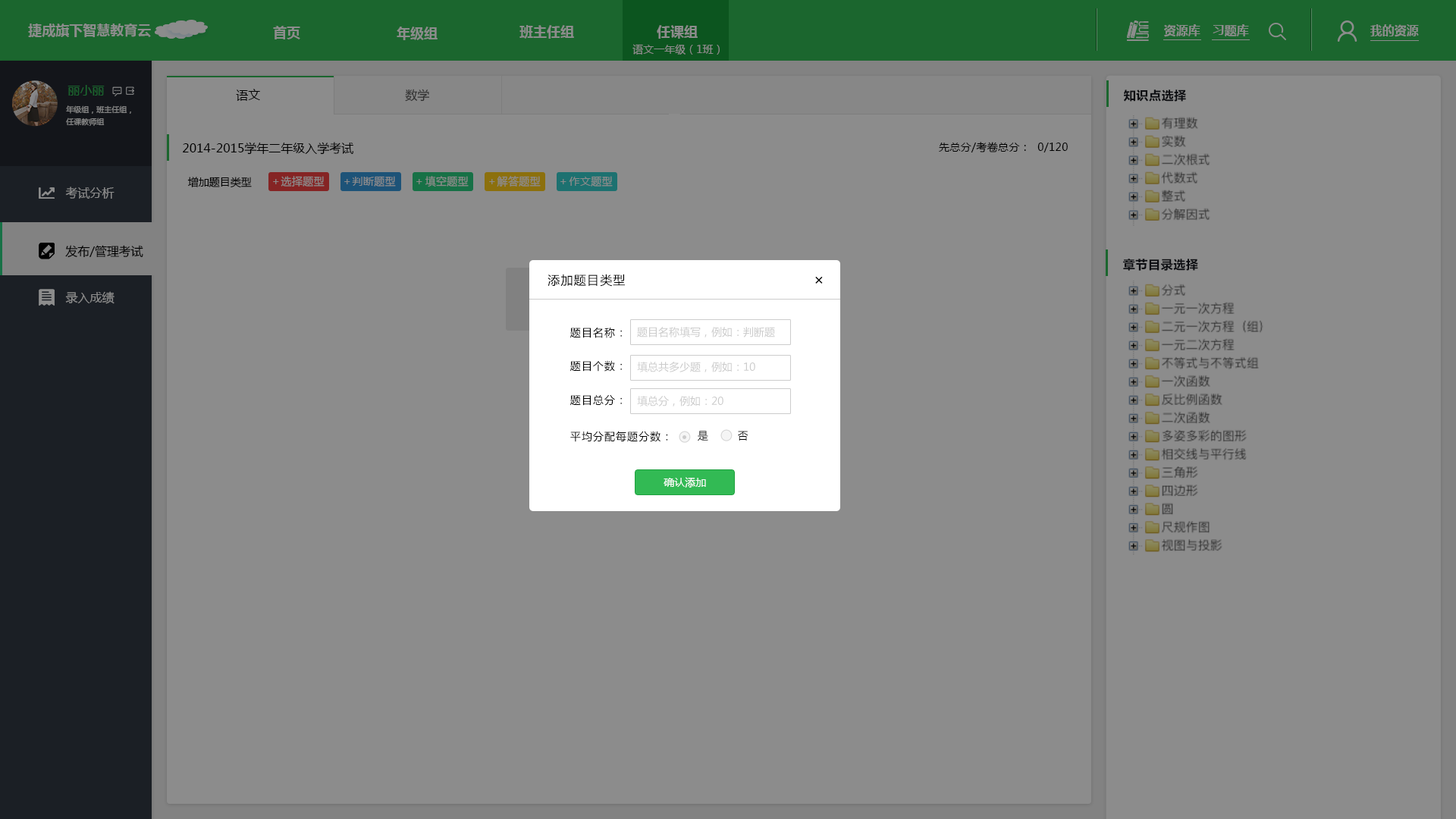
<style>
.page{position:relative;width:1456px;height:819px;background:#8c8c8c}
.page>*{position:absolute;margin:0}
.t1{font:13.6px "MicrosoftYaHei-Bold";color:#8c8c8c}
.t2{font:12.1px "MicrosoftYaHei-Bold";color:#8c8c8c}
.t3{font:10.6px "MicrosoftYaHei";color:#8c8c8c}
.t4{font:12.1px "MicrosoftYaHei";color:#1b662e}
.t5{font:12.1px "MicrosoftYaHei";color:#000000}
.t6{font:12.1px "MicrosoftYaHei";color:#2e2e2e}
.t7{font:12.1px "MicrosoftYaHei-Bold";letter-spacing:0.04em;color:#171a21}
.t8{font:7.6px/12.1px "MicrosoftYaHei";color:#8c8c8c}
.t9{font:10.6px "MicrosoftYaHei";letter-spacing:0.025em;color:#000000}
.t10{font:10.6px "MicrosoftYaHei";color:#000000}
.t11{font:10.6px "MicrosoftYaHei";letter-spacing:0.025em;color:#8c8c8c}
.t12{font:12.1px "MicrosoftYaHei";color:#8c8c8c}
.t13{font:12.1px "MicrosoftYaHei";letter-spacing:0.075em;color:#000000}
.t14{font:15.2px "MicrosoftYaHei";letter-spacing:0.075em;color:#000000}
.t15{font:10.6px "MicrosoftYaHei";letter-spacing:0.075em;color:#000000}
.t16{font:10.6px "MicrosoftYaHei";color:#cccccc}
.t17{font:10.6px "MicrosoftYaHei";color:#fffefe}
</style>
<div class="page">
<p class="t1" style="left:28px;top:24px;width:123px;height:13px">捷成旗下智慧教育云</p>
<p class="t1" style="left:273px;top:26px;width:27px;height:13px">首页</p>
<p class="t1" style="left:397px;top:27px;width:41px;height:13px">年级组</p>
<p class="t1" style="left:519px;top:25px;width:55px;height:14px">班主任组</p>
<p class="t1" style="left:657px;top:25px;width:41px;height:14px">任课组</p>
<p class="t2" style="left:1164px;top:24px;width:36px;height:13px">资源库</p>
<p class="t2" style="left:1213px;top:24px;width:36px;height:13px">习题库</p>
<p class="t2" style="left:1370px;top:24px;width:49px;height:13px">我的资源</p>
<p class="t3" style="left:632px;top:44px;width:88px;height:11px">语文一年级（1班）</p>
<p class="t4" style="left:67px;top:85px;width:38px;height:11px">丽小丽</p>
<p class="t5" style="left:236px;top:89px;width:24px;height:12px">语文</p>
<p class="t6" style="left:405px;top:89px;width:24px;height:13px">数学</p>
<p class="t7" style="left:1124px;top:89px;width:62px;height:13px">知识点选择</p>
<p class="t8" style="left:66px;top:105px;width:65px;height:21px">年级组，班主任组，<br>任课教师组</p>
<p class="t5" style="left:183px;top:142px;width:170px;height:13px">2014-2015学年二年级入学考试</p>
<p class="t9" style="left:939px;top:142px;width:129px;height:10px">先总分/考卷总分：  0/120</p>
<p class="t10" style="left:187px;top:177px;width:65px;height:11px">增加题目类型</p>
<p class="t11" style="left:273px;top:179px;width:6px;height:5px">＋</p>
<p class="t11" style="left:281px;top:176px;width:44px;height:11px">选择题型</p>
<p class="t11" style="left:344px;top:179px;width:6px;height:5px">＋</p>
<p class="t11" style="left:352px;top:176px;width:44px;height:11px">判断题型</p>
<p class="t11" style="left:416px;top:179px;width:6px;height:5px">＋</p>
<p class="t11" style="left:425px;top:176px;width:44px;height:11px">填空题型</p>
<p class="t11" style="left:489px;top:179px;width:6px;height:5px">＋</p>
<p class="t11" style="left:497px;top:176px;width:44px;height:11px">解答题型</p>
<p class="t11" style="left:560px;top:179px;width:6px;height:5px">＋</p>
<p class="t11" style="left:569px;top:176px;width:44px;height:11px">作文题型</p>
<p class="t12" style="left:65px;top:187px;width:50px;height:12px">考试分析</p>
<p class="t5" style="left:65px;top:245px;width:78px;height:13px">发布/管理考试</p>
<p class="t7" style="left:1123px;top:259px;width:75px;height:12px">章节目录选择</p>
<p class="t13" style="left:548px;top:274px;width:77px;height:13px">添加题目类型</p>
<p class="t14" style="left:815px;top:276px;width:8px;height:8px">×</p>
<p class="t12" style="left:65px;top:291px;width:50px;height:13px">录入成绩</p>
<p class="t15" style="left:570px;top:327px;width:52px;height:11px">题目名称：</p>
<p class="t16" style="left:637px;top:327px;width:138px;height:10px">题目名称填写，例如：判断题</p>
<p class="t15" style="left:570px;top:360px;width:52px;height:12px">题目个数：</p>
<p class="t16" style="left:637px;top:362px;width:118px;height:10px">填总共多少题，例如：10</p>
<p class="t15" style="left:570px;top:394px;width:52px;height:12px">题目总分：</p>
<p class="t16" style="left:637px;top:396px;width:86px;height:10px">填总分，例如：20</p>
<p class="t15" style="left:570px;top:431px;width:98px;height:11px">平均分配每题分数：</p>
<p class="t15" style="left:698px;top:431px;width:10px;height:10px">是</p>
<p class="t15" style="left:738px;top:431px;width:10px;height:10px">否</p>
<p class="t17" style="left:664px;top:477px;width:42px;height:11px">确认添加</p>
</div>
